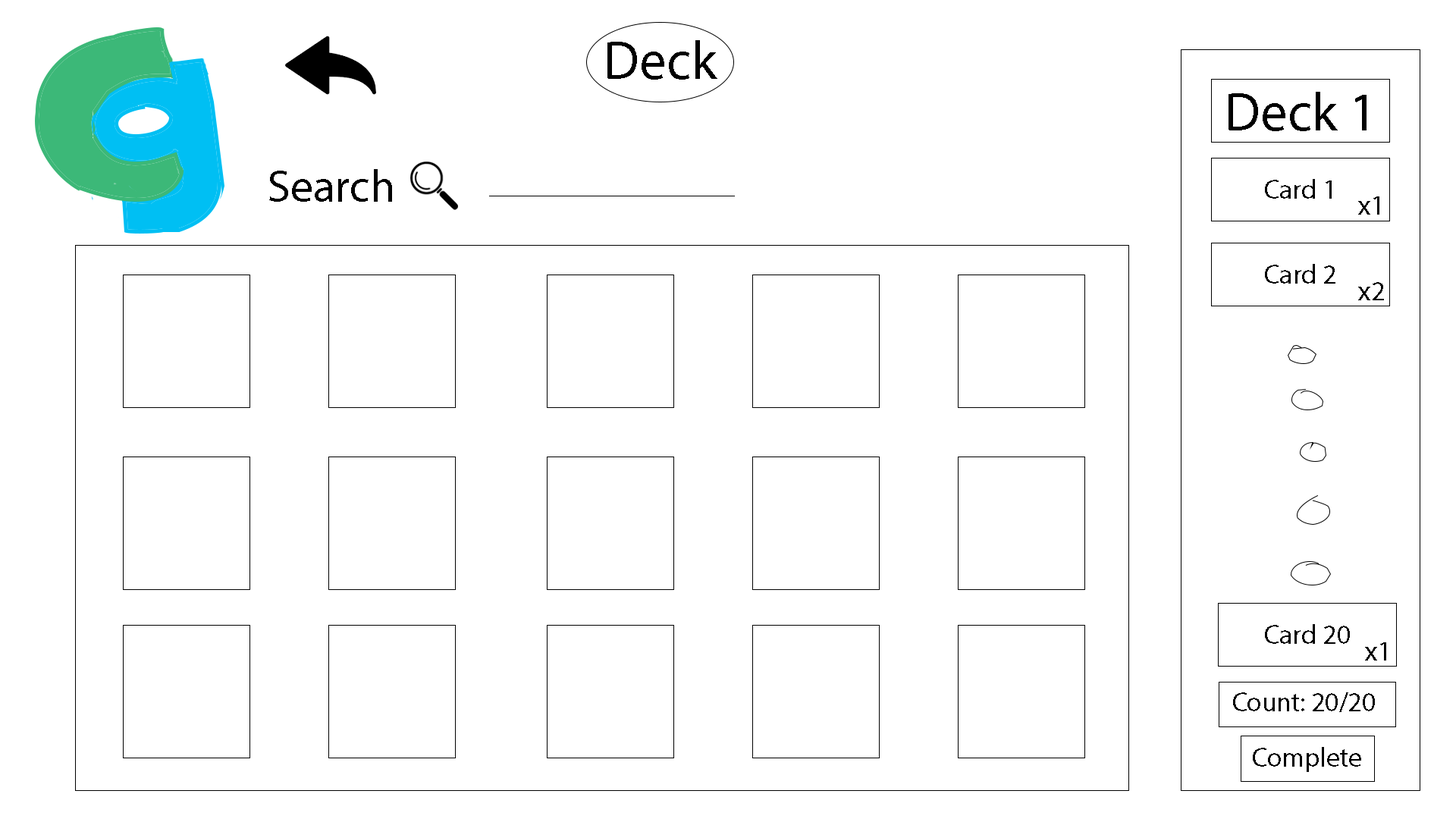
<style>
.page{position:relative;width:1456px;height:819px;background:#ffffff}
.page>*{position:absolute;margin:0}
.t1{font:54.6px "MyriadPro-Regular";color:#000000}
.t2{font:45.5px "MyriadPro-Regular";color:#000000}
.t3{font:27.3px "MyriadPro-Regular";color:#000000}
</style>
<div class="page">
<p class="t1" style="left:607px;top:40px;width:110px;height:40px">Deck</p>
<p class="t1" style="left:1228px;top:92px;width:138px;height:39px">Deck 1</p>
<p class="t2" style="left:269px;top:169px;width:123px;height:33px">Search</p>
<p class="t3" style="left:1265px;top:179px;width:67px;height:20px">Card 1</p>
<p class="t3" style="left:1358px;top:196px;width:21px;height:19px">x1</p>
<p class="t3" style="left:1265px;top:264px;width:70px;height:20px">Card 2</p>
<p class="t3" style="left:1358px;top:282px;width:26px;height:18px">x2</p>
<p class="t3" style="left:1265px;top:624px;width:85px;height:20px">Card 20</p>
<p class="t3" style="left:1365px;top:642px;width:21px;height:18px">x1</p>
<p class="t3" style="left:1233px;top:692px;width:142px;height:20px">Count: 20/20</p>
<p class="t3" style="left:1253px;top:747px;width:108px;height:25px">Complete</p>
</div>
